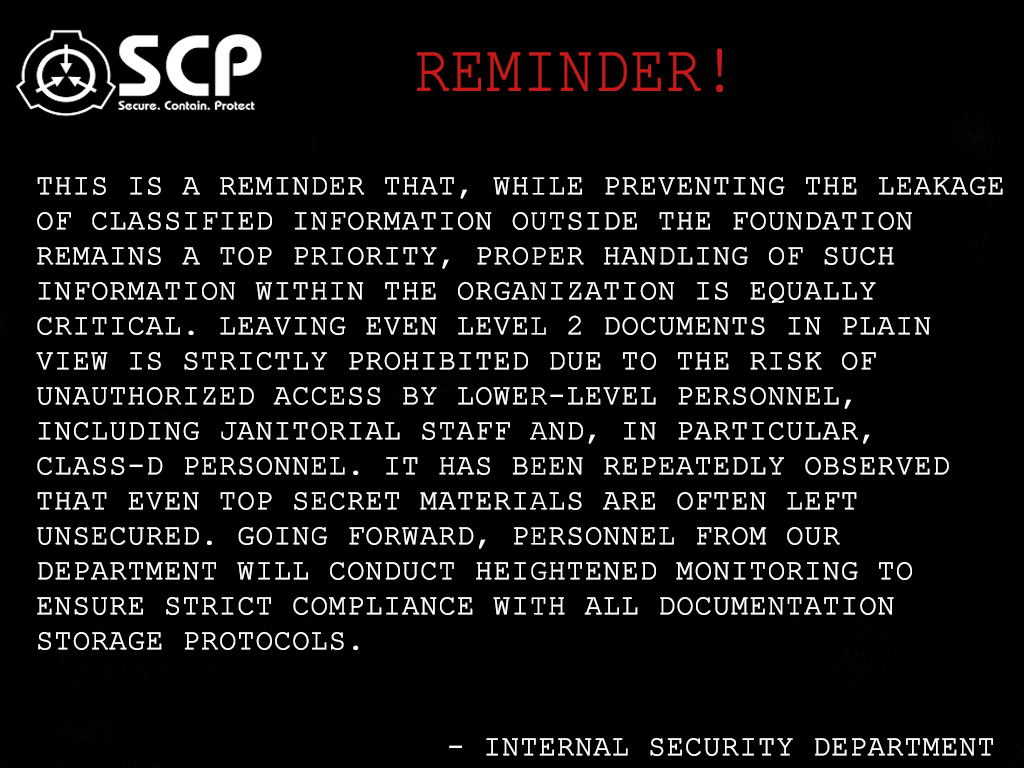
<style>
.page{position:relative;width:1024px;height:768px;background:#000000}
.page>*{position:absolute;margin:0}
.t1{font:66.7px "CourierNewPSMT";color:#c61a1a;text-transform:uppercase;font-weight:bold;scale:0.86 1}
.t2{font:29.2px "CourierNewPSMT";color:#ffffff;text-transform:uppercase;font-weight:bold}
</style>
<div class="page">
<p class="t1" style="left:417px;top:48px;width:306px;height:44px">Reminder!</p>
<p class="t2" style="left:36px;top:177px;width:967px;height:473px;text-align:justify">This is a reminder that, while preventing the leakage of classified information outside the Foundation remains a top priority, proper handling of such information within the organization is equally critical. Leaving even Level 2 documents in plain view is strictly prohibited due to the risk of unauthorized access by lower-level personnel, including janitorial staff and, in particular, Class-D personnel. It has been repeatedly observed that even top secret materials are often left unsecured. Going forward, personnel from our department will conduct heightened monitoring to ensure strict compliance with all documentation storage protocols.</p>
<p class="t2" style="left:449px;top:738px;width:544px;height:18px">- Internal Security Department</p>
</div>
